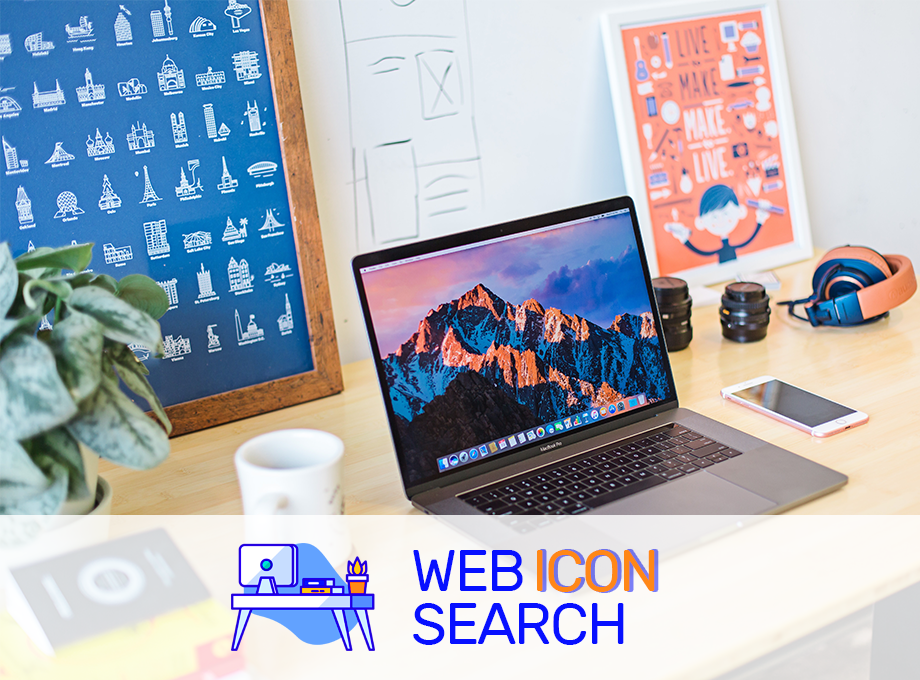
<style>
.page{position:relative;width:920px;height:680px}
.page>*{position:absolute;margin:0}
.t1{font:58.3px/52.8px "Rubik-Regular";letter-spacing:-0.04em;color:#0710ff}
.t2{font:58.3px "Rubik-Regular";letter-spacing:-0.04em;color:#ff8716}
</style>
<div class="page">
<p class="t1" style="left:413px;top:550px;width:211px;height:95px">WEB <br>SEARCH</p>
<p class="t2" style="left:537px;top:550px;width:118px;height:42px">ICON</p>
</div>
